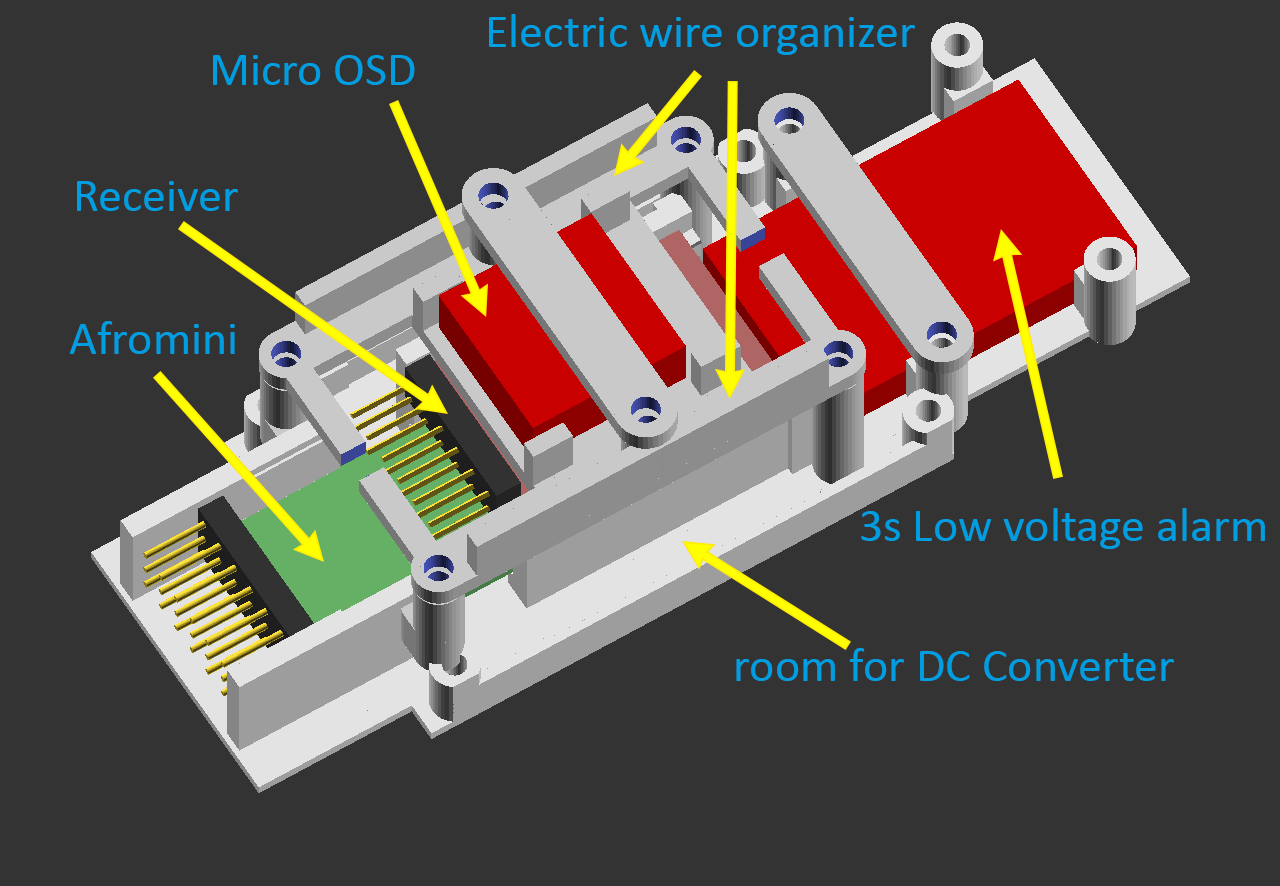
<style>
.page{position:relative;width:1280px;height:886px;background:#333333}
.page>*{position:absolute;margin:0}
.t1{font:48px "Calibri";color:#009ee0}
</style>
<div class="page">
<p class="t1" style="left:489px;top:14px;width:426px;height:41px">Electric wire organizer</p>
<p class="t1" style="left:213px;top:55px;width:202px;height:30px">Micro OSD</p>
<p class="t1" style="left:77px;top:181px;width:161px;height:30px">Receiver</p>
<p class="t1" style="left:69px;top:321px;width:166px;height:33px">Afromini</p>
<p class="t1" style="left:861px;top:508px;width:404px;height:41px">3s Low voltage alarm</p>
<p class="t1" style="left:736px;top:648px;width:438px;height:33px">room for DC Converter</p>
</div>
